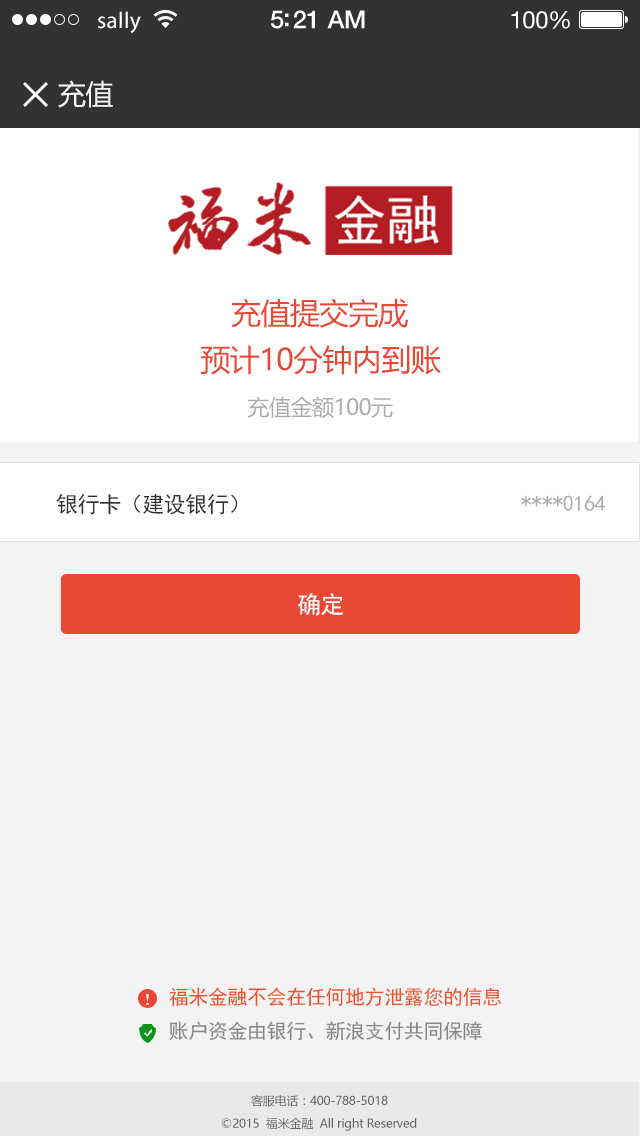
<style>
.page{position:relative;width:640px;height:1136px;background:#f3f3f3}
.page>*{position:absolute;margin:0}
.t1{font:23px "MyriadPro-Regular";letter-spacing:0.02em;color:#ffffff}
.t2{font:25px "HelveticaNeue-Medium";letter-spacing:-0.02em;color:#ffffff}
.t3{font:24px "HelveticaNeue";letter-spacing:-0.02em;color:#ffffff}
.t4{font:28px "MicrosoftYaHei";letter-spacing:-0.02em;color:#f3f3f3}
.t5{font:30px "MicrosoftYaHei";letter-spacing:-0.02em;color:#e94834}
.t6{font:22px "MicrosoftYaHei";letter-spacing:-0.02em;color:#acacac}
.t7{font:22px "SimHei";letter-spacing:-0.02em;color:#323232}
.t8{font:22px "SimHei";letter-spacing:-0.02em;color:#acacac}
.t9{font:24px "SimHei";letter-spacing:-0.02em;color:#ffffff}
.t10{font:20px "SimHei";letter-spacing:-0.02em;color:#ea522b}
.t11{font:20px "SimHei";letter-spacing:-0.02em;color:#878787}
.t12{font:12px "MicrosoftYaHei";letter-spacing:-0.02em;color:#646464}
</style>
<div class="page">
<p class="t1" style="left:98px;top:11px;width:43px;height:22px">sally</p>
<p class="t2" style="left:271px;top:10px;width:94px;height:19px">5:21 AM</p>
<p class="t3" style="left:511px;top:11px;width:59px;height:18px">100%</p>
<p class="t4" style="left:58px;top:80px;width:55px;height:28px">充值</p>
<p class="t5" style="left:231px;top:298px;width:177px;height:30px">充值提交完成</p>
<p class="t5" style="left:200px;top:345px;width:241px;height:30px">预计10分钟内到账</p>
<p class="t6" style="left:247px;top:396px;width:146px;height:23px">充值金额100元</p>
<p class="t7" style="left:56px;top:493px;width:181px;height:22px">银行卡（建设银行）</p>
<p class="t8" style="left:521px;top:495px;width:84px;height:16px">****0164</p>
<p class="t9" style="left:297px;top:593px;width:47px;height:23px">确定</p>
<p class="t10" style="left:169px;top:987px;width:333px;height:20px">福米金融不会在任何地方泄露您的信息</p>
<p class="t11" style="left:169px;top:1021px;width:313px;height:20px">账户资金由银行、新浪支付共同保障</p>
<p class="t12" style="left:251px;top:1095px;width:137px;height:12px">客服电话：400-788-5018</p>
<p class="t12" style="left:221px;top:1117px;width:196px;height:14px">©2015  福米金融  All right Reserved</p>
</div>
